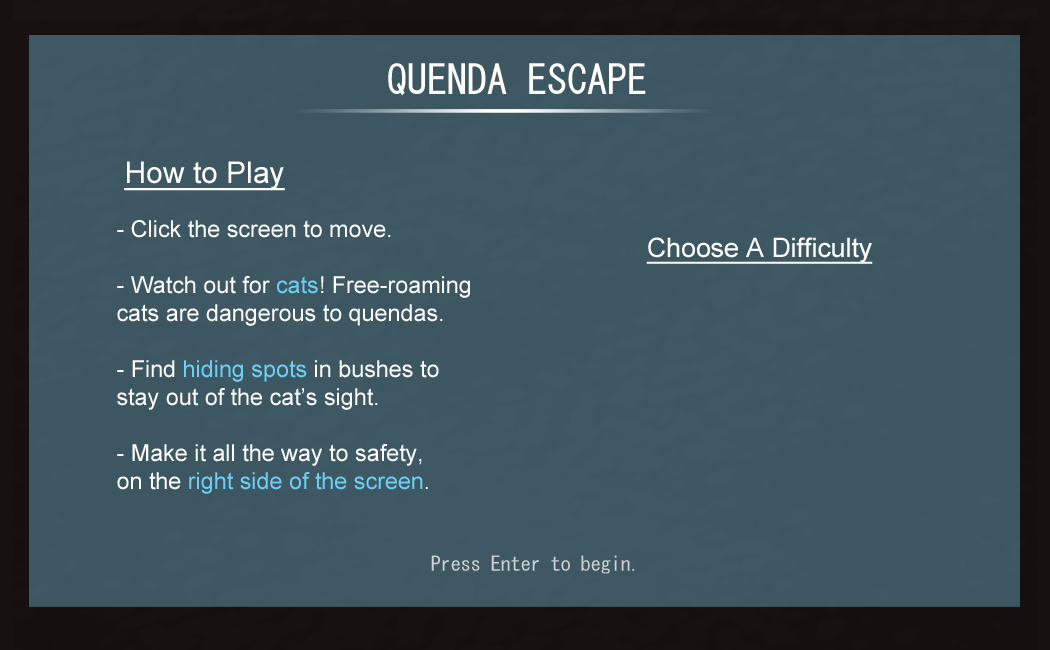
<style>
.page{position:relative;width:1050px;height:650px;background:#3c5761}
.page>*{position:absolute;margin:0}
.t1{font:40px "MS-Gothic";color:#ffffff}
.t2{font:30px "ArialMT";color:#ffffff;text-decoration:underline}
.t3{font:23.3px "ArialMT";color:#ffffff}
.t4{font:23.3px "ArialMT";color:#6dcff6}
.t5{font:26.7px "ArialMT";color:#ffffff;text-decoration:underline}
.t6{font:20px "MS-Gothic";color:#d1d1d1}
</style>
<div class="page">
<p class="t1" style="left:388px;top:63px;width:258px;height:33px">QUENDA ESCAPE</p>
<p class="t2" style="left:124px;top:161px;width:161px;height:30px">How to Play</p>
<p class="t3" style="left:117px;top:220px;width:353px;height:274px;text-align:center"><span class="t2"><br><br><br></span>- Click the screen to move. <br><br>- Watch out for <span class="t4">cats</span>! Free-roaming <br>cats are dangerous to quendas.<br><br>- Find <span class="t4">hiding spots</span> in bushes to <br>stay out of the cat’s sight.<br><br>- Make it all the way to safety, <br>on the <span class="t4">right side of the screen</span>.</p>
<p class="t5" style="left:646px;top:237px;width:227px;height:27px">Choose A Difficulty</p>
<p class="t6" style="left:431px;top:555px;width:204px;height:19px">Press Enter to begin.</p>
</div>
